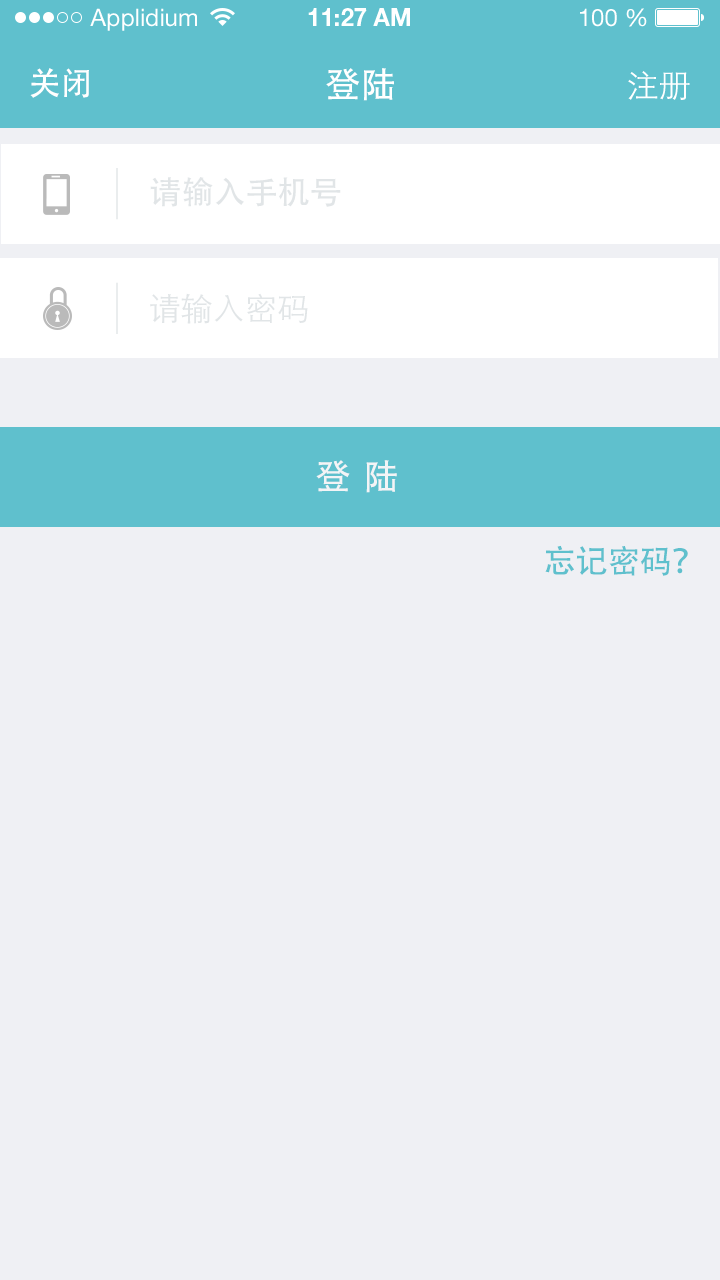
<style>
.page{position:relative;width:720px;height:1280px;background:#eff0f4}
.page>*{position:absolute;margin:0}
.t1{font:32px "AdobeHeitiStd-Regular";color:#ffffff}
.t2{font:36px "AdobeHeitiStd-Regular";color:#ffffff}
.t3{font:32px "STHeitiSC-Light";color:#ffffff}
.t4{font:32px "AdobeHeitiStd-Regular";color:#e1e5e7}
.t5{font:32px "STHeitiSC-Light";color:#e1e5e7}
.t6{font:36px "AdobeHeitiStd-Regular";letter-spacing:-0.08em;color:#f3f4f6}
.t7{font:32px "AdobeHeitiStd-Regular";color:#5fc0cd}
</style>
<div class="page">
<p class="t1" style="left:30px;top:68px;width:59px;height:30px">关闭</p>
<p class="t2" style="left:326px;top:68px;width:68px;height:33px">登陆</p>
<p class="t3" style="left:628px;top:71px;width:62px;height:29px">注册</p>
<p class="t4" style="left:150px;top:177px;width:191px;height:30px">请输入手机号</p>
<p class="t5" style="left:150px;top:293px;width:158px;height:31px">请输入密码</p>
<p class="t6" style="left:316px;top:460px;width:81px;height:33px">登   陆</p>
<p class="t7" style="left:545px;top:545px;width:143px;height:31px">忘记密码？</p>
</div>
